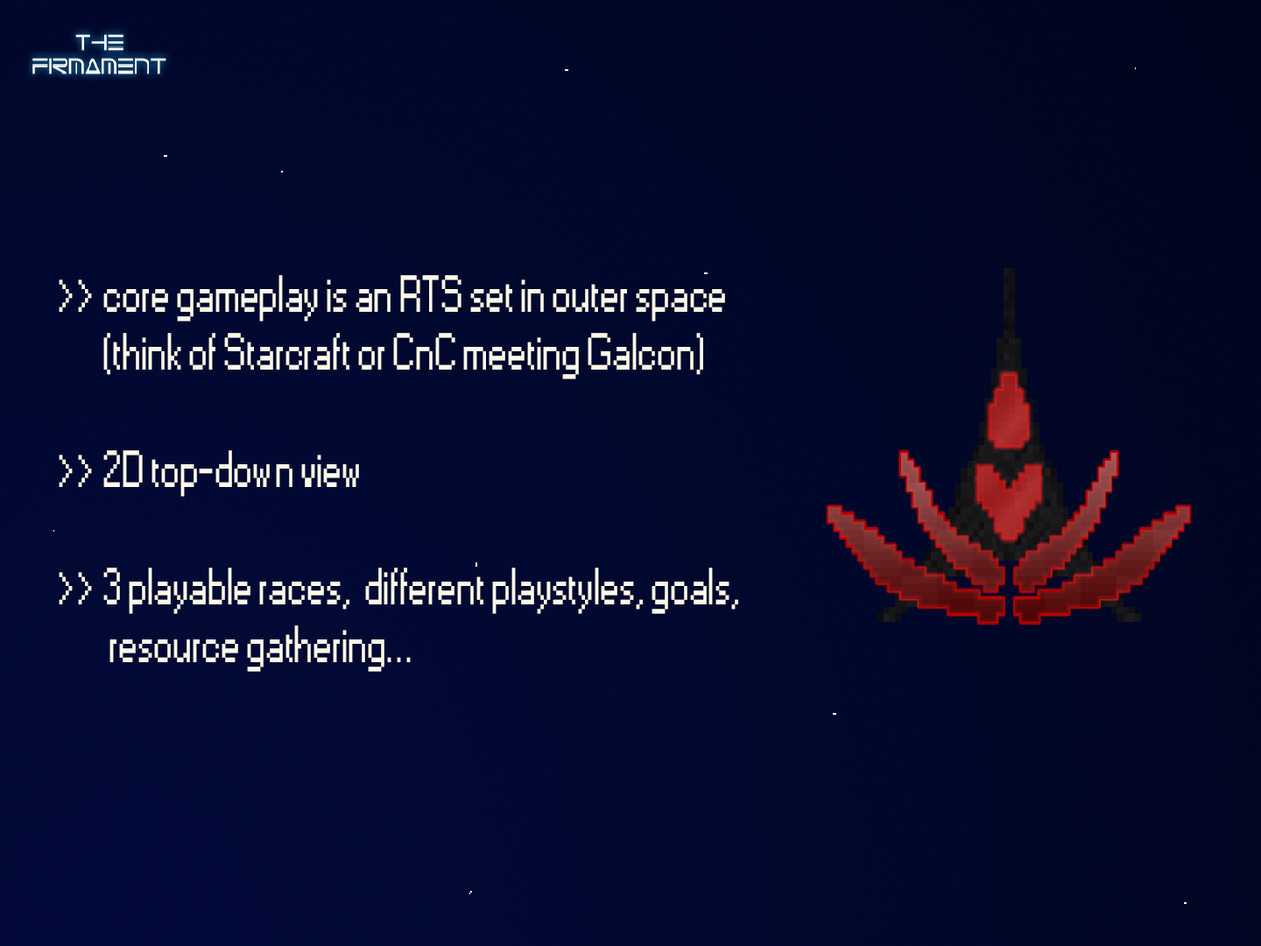
<style>
.page{position:relative;width:1261px;height:946px}
.page>*{position:absolute;margin:0}
.t1{font:48.7px "Small Fonts";color:#fcf9e9;scale:0.84 1}
</style>
<div class="page">
<p class="t1" style="left:59px;top:275px;width:679px;height:397px">&gt;&gt; core gameplay is an RTS set in outer space<br>       (think of Starcraft or CnC meeting Galcon)<br><br>&gt;&gt; 2D top-down view <br><br>&gt;&gt; 3 playable races,  different playstyles, goals,<br>        resource gathering...</p>
</div>
